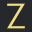
<style>
.page{position:relative;width:32px;height:32px;background:#26282c}
.page>*{position:absolute;margin:0}
.t1{font:35px "Vonique43";color:#f0de86}
</style>
<div class="page">
<p class="t1" style="left:7px;top:3px;width:18px;height:26px">Z</p>
</div>
